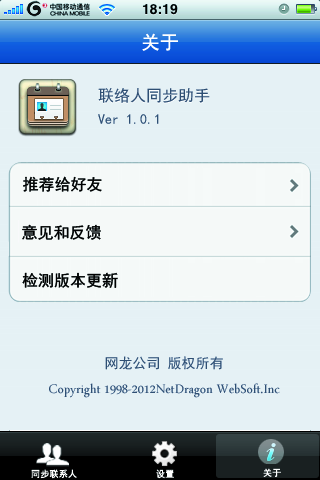
<style>
.page{position:relative;width:320px;height:480px;background:#e5f1f5}
.page>*{position:absolute;margin:0}
.t1{font:19px "SimHei";color:#ffffff}
.t2{font:16px "SimHei";color:#ffffff}
.t3{font:16px "SimHei";color:#2f4f73}
.t4{font:14px "SimHei";color:#2f4f73}
.t5{font:16px "SimHei";color:#000000}
.t6{font:18px/24px "ArabicTypesetting";color:#2f4f73}
.t7{font:14px/24px "SimHei";color:#2f4f73}
.t8{font:9px "SimHei";color:#ffffff;font-weight:bold}
</style>
<div class="page">
<p class="t1" style="left:142px;top:33px;width:36px;height:18px">关于</p>
<p class="t2" style="left:98px;top:89px;width:112px;height:15px">联络人同步助手</p>
<p class="t3" style="left:98px;top:88px;width:112px;height:15px">联络人同步助手</p>
<p class="t4" style="left:98px;top:114px;width:61px;height:10px">Ver 1.0.1</p>
<p class="t5" style="left:23px;top:176px;width:79px;height:16px">推荐给好友</p>
<p class="t5" style="left:22px;top:224px;width:79px;height:16px">意见和反馈</p>
<p class="t5" style="left:22px;top:272px;width:96px;height:16px">检测版本更新</p>
<p class="t6" style="left:49px;top:356px;width:231px;height:42px;text-align:center"><span class="t7">网龙公司 版权所有<br></span>Copyright 1998-2012NetDragon WebSoft.Inc</p>
<p class="t8" style="left:31px;top:469px;width:46px;height:10px">同步联系人</p>
<p class="t8" style="left:156px;top:469px;width:18px;height:10px">设置</p>
<p class="t8" style="left:263px;top:468px;width:18px;height:9px">关于</p>
</div>
